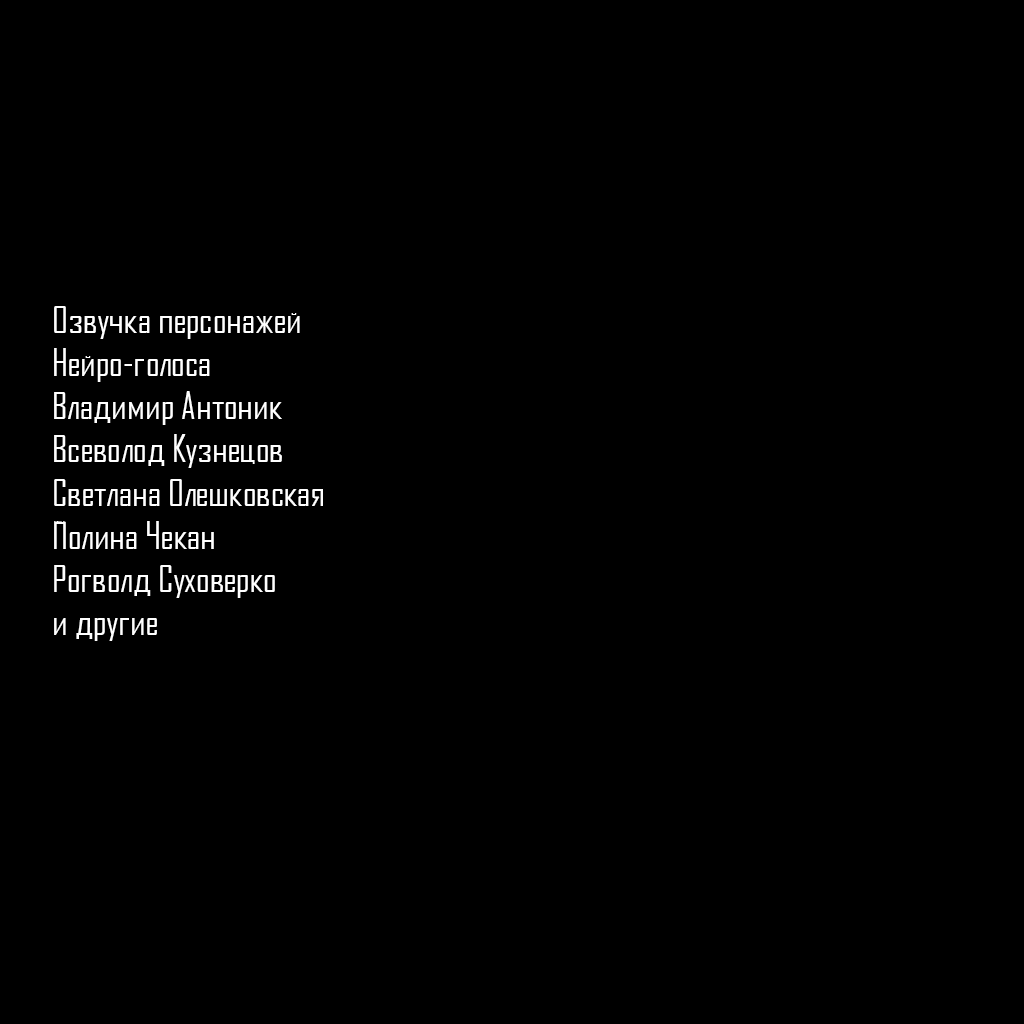
<style>
.page{position:relative;width:1024px;height:1024px;background:#000000}
.page>*{position:absolute;margin:0}
.t1{font:36px "AgencyFBCyrillic";color:#ffffff}
</style>
<div class="page">
<p class="t1" style="left:54px;top:306px;width:269px;height:335px">Озвучка персонажей<br>Нейро-голоса<br>Владимир Антоник<br>Всеволод Кузнецов<br>Светлана Олешковская<br>Полина Чекан<br>Рогволд Суховерко<br>и другие</p>
</div>
